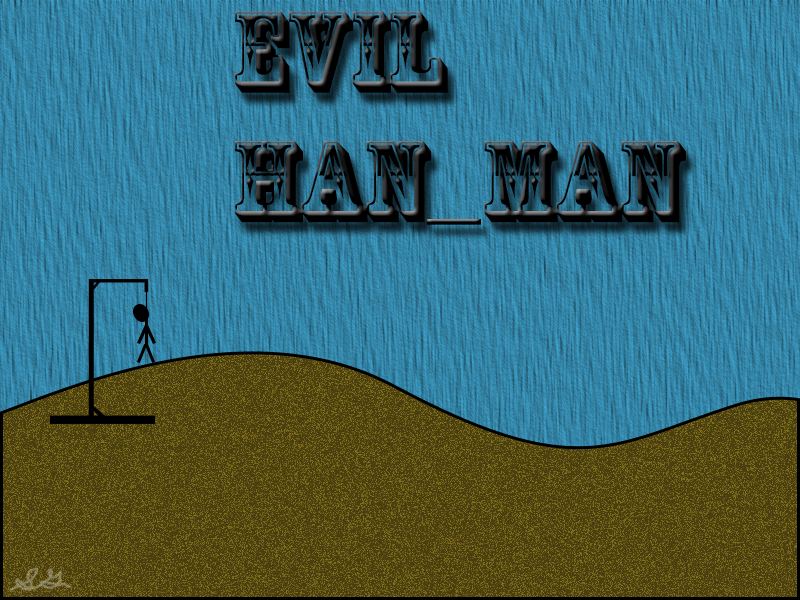
<style>
.page{position:relative;width:800px;height:600px}
.page>*{position:absolute;margin:0}
.t1{font:108px "RosewoodStd-Regular";color:#000000}
</style>
<div class="page">
<p class="t1" style="left:235px;top:11px;width:451px;height:214px">EVIl <br>HAn_MAN</p>
</div>
